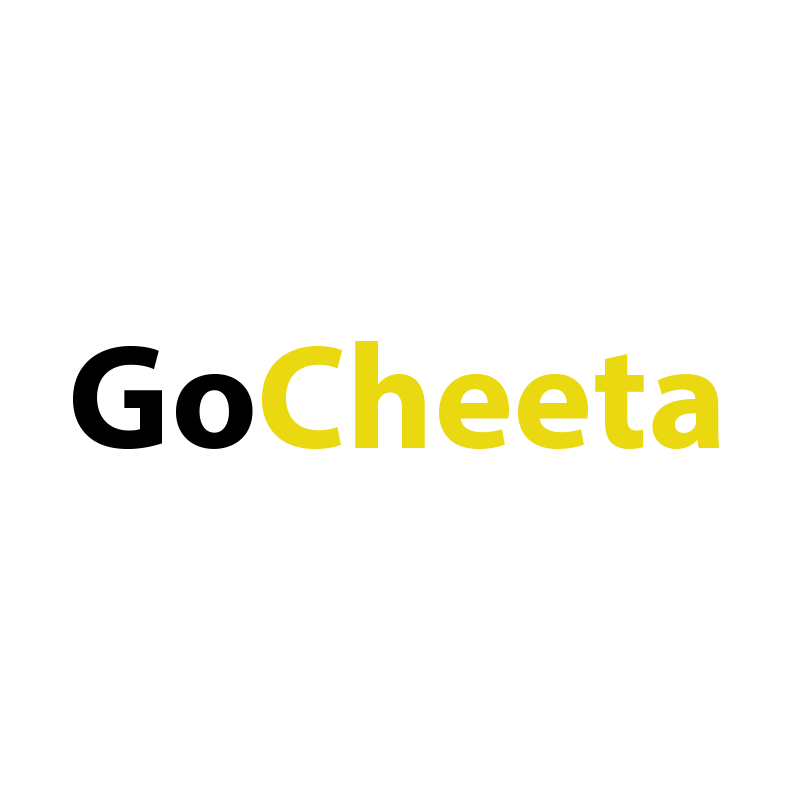
<style>
.page{position:relative;width:791px;height:792px;background:#ffffff}
.page>*{position:absolute;margin:0}
.t1{font:150px "MyriadPro-Bold";color:#ead811}
.t2{font:150px "MyriadPro-Bold";color:#000000}
</style>
<div class="page">
<p class="t1" style="left:73px;top:341px;width:647px;height:108px"><span class="t2">Go</span>Cheeta</p>
</div>
